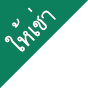
<style>
.page{position:relative;width:88px;height:88px;background:#ffffff}
.page>*{position:absolute;margin:0}
.t1{font:33.3px "DSNPreeCha";color:#ffffff}
</style>
<div class="page">
<p class="t1" style="left:4px;top:7px;width:52px;height:45px;rotate:-45deg">ให้เช่า</p>
</div>
